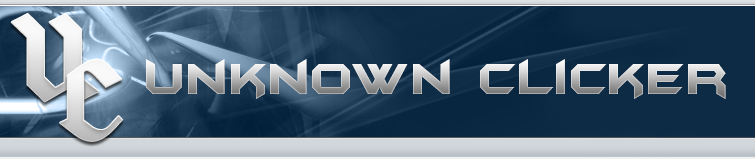
<style>
.page{position:relative;width:755px;height:159px}
.page>*{position:absolute;margin:0}
.t1{font:50px "BatmanForeverAlternate"}
</style>
<div class="page">
<p class="t1" style="left:146px;top:59px;width:580px;height:40px">Unknown Clicker</p>
</div>
